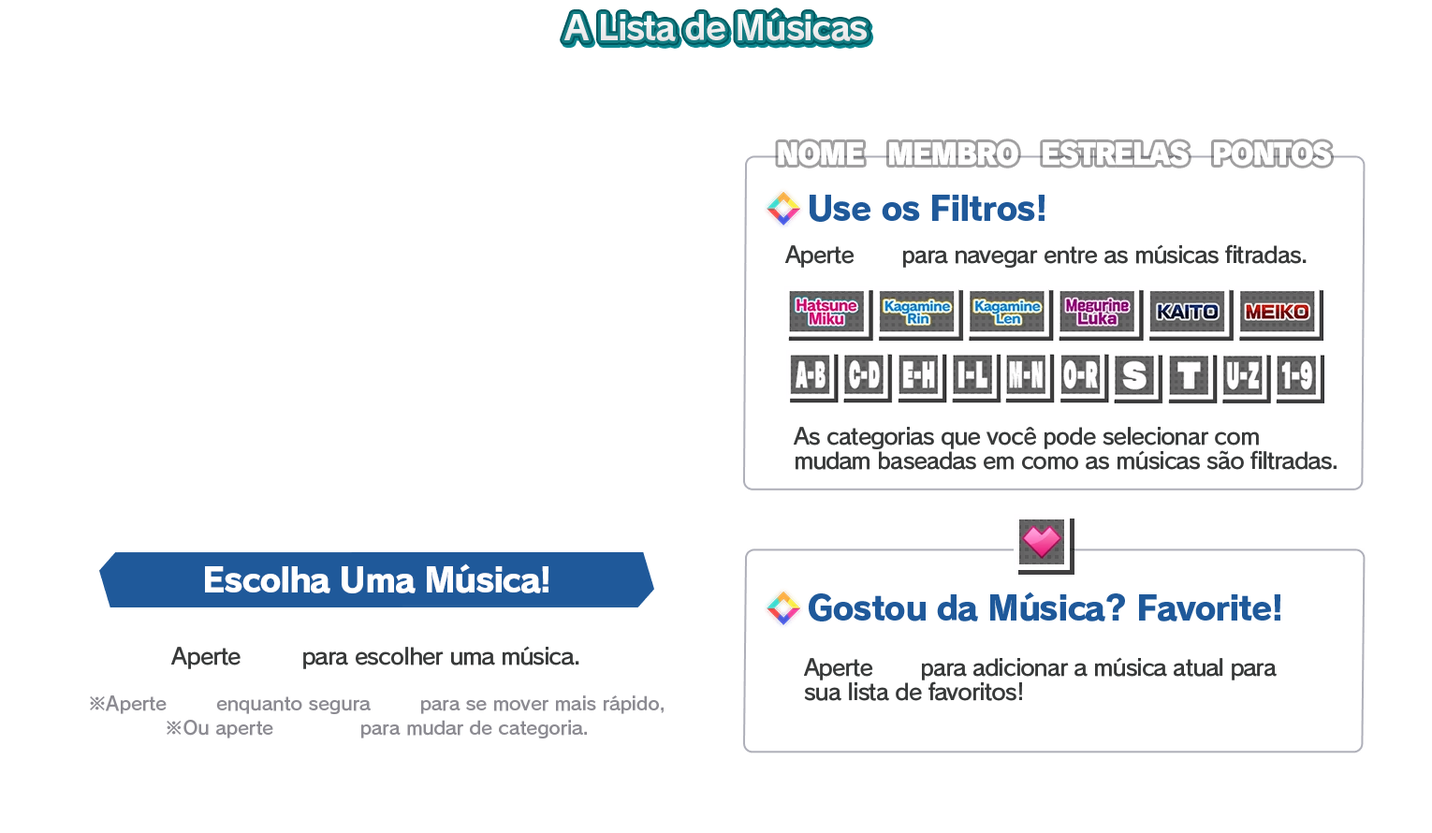
<style>
.page{position:relative;width:1432px;height:833px;background:#ffffff}
.page>*{position:absolute;margin:0}
.t1{font:33.7px "RodinPro-B";letter-spacing:-0.039em;color:#efeff0}
.t2{font:28.7px "RodinPro-UB";letter-spacing:-0.069em;color:#ffffff}
.t3{font:33.7px "RodinPro-EB";letter-spacing:-0.04em;color:#1f599a}
.t4{font:22.5px "RodinPro-DB";letter-spacing:-0.04em;color:#383a3a}
.t5{font:22.5px/23.7px "RodinPro-DB";letter-spacing:-0.04em;color:#383a3a}
.t6{font:33.7px "RodinPro-EB";letter-spacing:-0.048em;color:#ffffff}
.t7{font:18.7px/23.7px "RodinPro-DB";letter-spacing:-0.014em;color:#8c8b92}
</style>
<div class="page">
<p class="t1" style="left:564px;top:12px;width:303px;height:29px">A Lista de Músicas</p>
<p class="t2" style="left:778px;top:141px;width:553px;height:25px">NOME   MEMBRO   ESTRELAS   PONTOS</p>
<p class="t3" style="left:809px;top:195px;width:235px;height:27px">Use os Filtros!</p>
<p class="t4" style="left:785px;top:244px;width:521px;height:24px">Aperte       para navegar entre as músicas fitradas.</p>
<p class="t5" style="left:794px;top:427px;width:542px;height:43px">As categorias que você pode selecionar com             <br>mudam baseadas em como as músicas são filtradas.</p>
<p class="t6" style="left:205px;top:563px;width:343px;height:30px">Escolha Uma Música!</p>
<p class="t3" style="left:809px;top:591px;width:471px;height:30px">Gostou da Música? Favorite!</p>
<p class="t4" style="left:171px;top:646px;width:408px;height:23px">Aperte         para escolher uma música.</p>
<p class="t5" style="left:804px;top:657px;width:472px;height:44px">Aperte       para adicionar a música atual para<br>sua lista de favoritos!</p>
<p class="t7" style="left:90px;top:695px;width:573px;height:43px;text-align:center">※Aperte        enquanto segura        para se mover mais rápido,<br>※Ou aperte              para mudar de categoria.</p>
</div>
